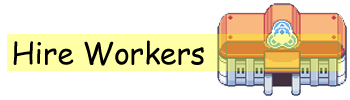
<style>
.page{position:relative;width:350px;height:100px;background:#ffffff}
.page>*{position:absolute;margin:0}
.t1{font:29.9px "ComicSansMS";color:#000000}
</style>
<div class="page">
<p class="t1" style="left:13px;top:40px;width:191px;height:26px">Hire Workers</p>
</div>
